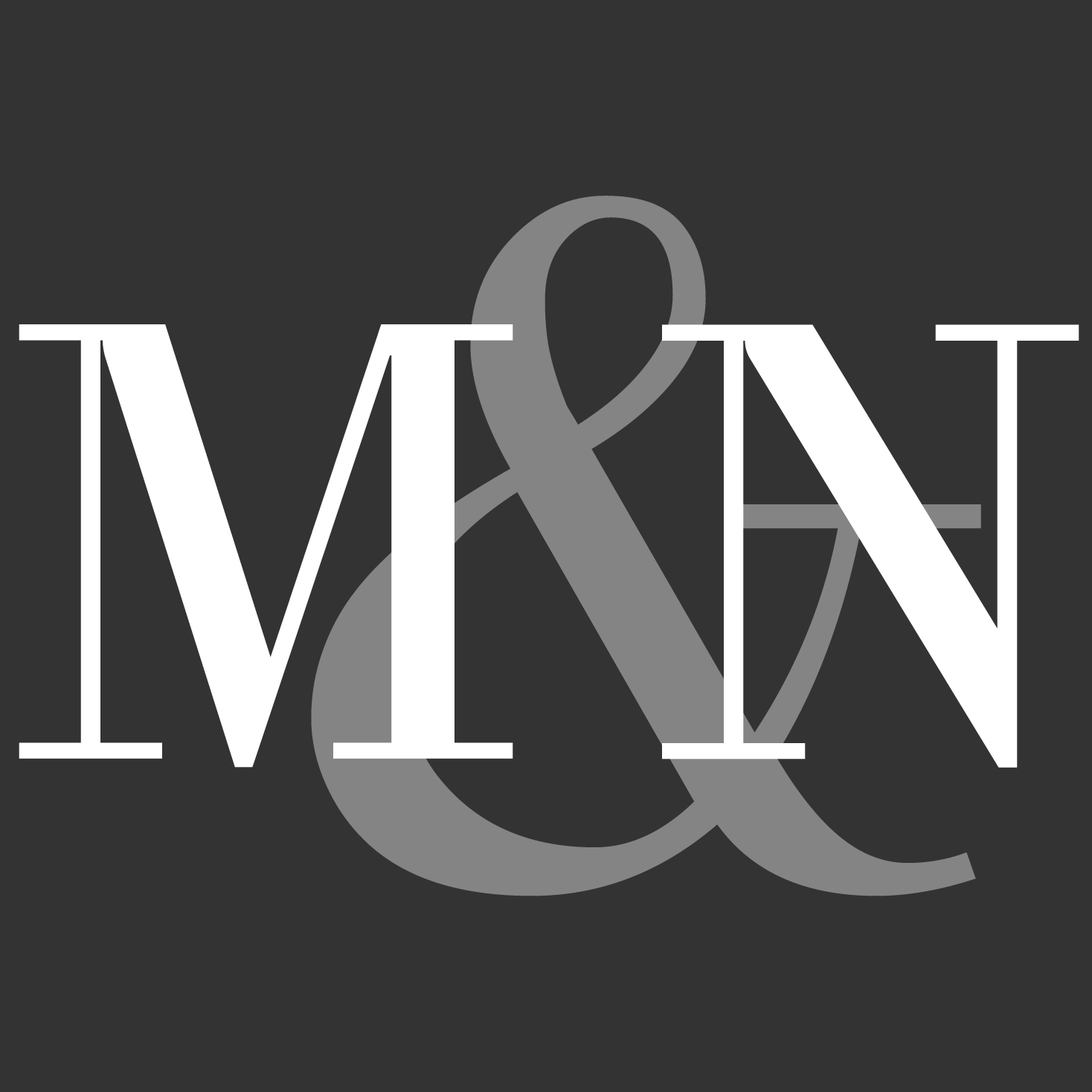
<style>
.page{position:relative;width:1092px;height:1092px;background:#333333}
.page>*{position:absolute;margin:0}
.t1{font:619.9px "TheanoDidot-Regular";letter-spacing:0.06em;color:#ffffff}
</style>
<div class="page">
<p class="t1" style="left:19px;top:324px;width:494px;height:444px">M</p>
<p class="t1" style="left:662px;top:324px;width:417px;height:444px">N</p>
</div>
